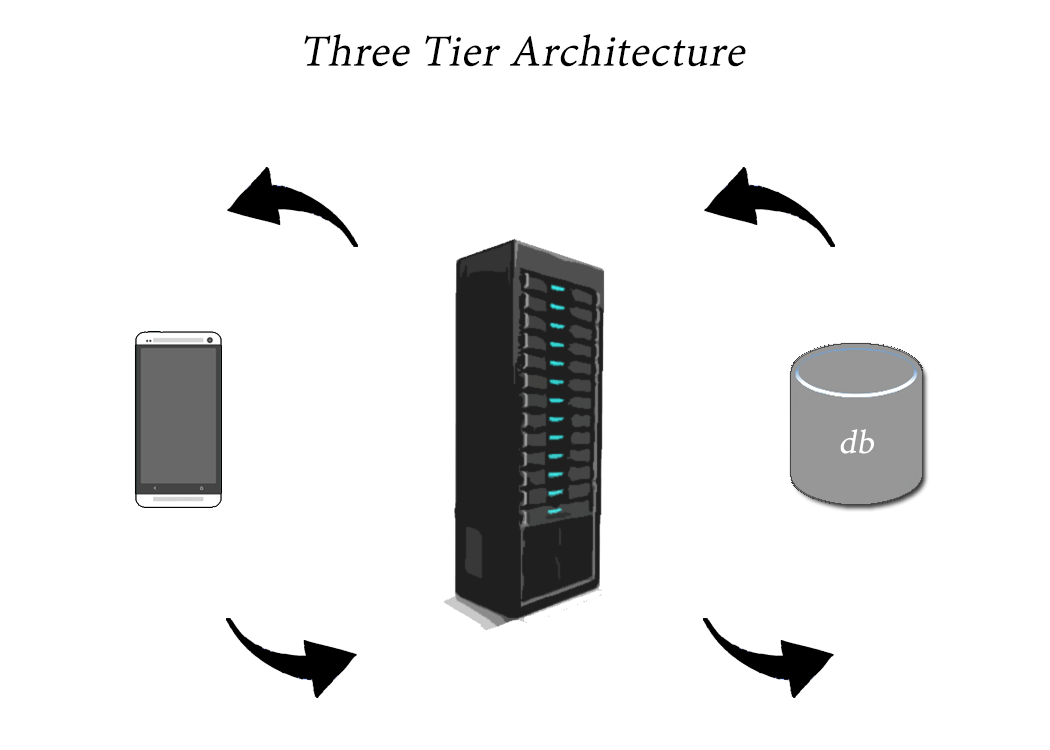
<style>
.page{position:relative;width:1050px;height:750px;background:#ffffff}
.page>*{position:absolute;margin:0}
.t1{font:48px "AdobeDevanagari-Regular";letter-spacing:0.02em;color:#010000;font-style:italic}
.t2{font:36px "AdobeDevanagari-Regular";letter-spacing:0.02em;color:#ffffff;font-style:italic}
</style>
<div class="page">
<p class="t1" style="left:304px;top:34px;width:442px;height:33px">Three Tier Architecture</p>
<p class="t2" style="left:840px;top:429px;width:34px;height:25px">db</p>
</div>
